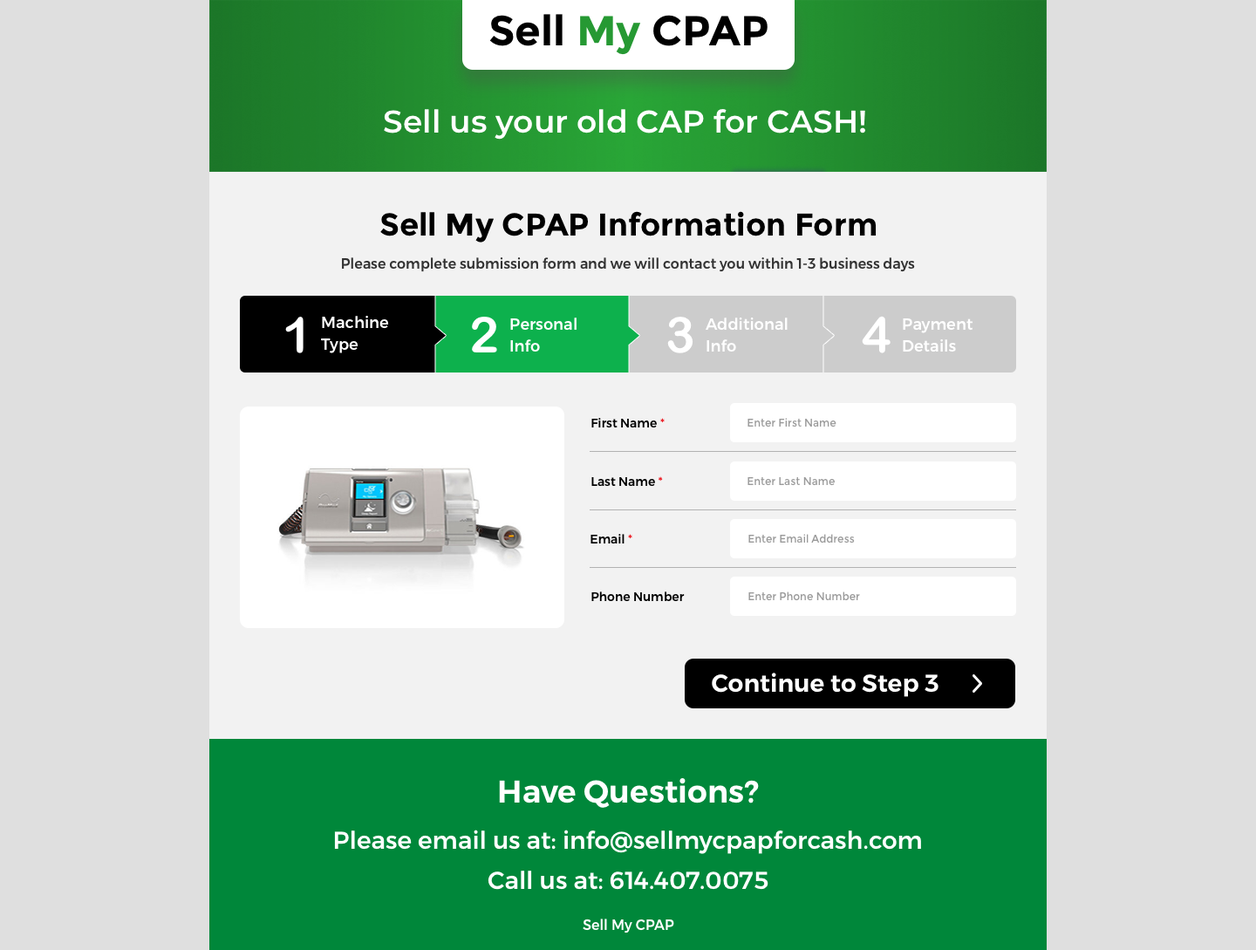
<style>
.page{position:relative;width:1256px;height:950px;background:#dfdfdf}
.page>*{position:absolute;margin:0}
.t1{font:41.9px "Montserrat-Bold";color:#000000}
.t2{font:41.9px "Montserrat-Bold";color:#269933}
.t3{font:31.4px "Montserrat-SemiBold";color:#ffffff}
.t4{font:31.4px "Montserrat-Bold";color:#000000}
.t5{font:14px "Montserrat-Medium";color:#323232}
.t6{font:49.6px "ArialW01-RoundedBold";color:#ffffff}
.t7{font:15.7px/21.8px "Montserrat-Medium";color:#ffffff}
.t8{font:12.2px "Montserrat-Medium";color:#000000}
.t9{font:12.2px "Montserrat-Medium";color:#ec1c24}
.t10{font:10.5px "Montserrat-Regular";color:#999999}
.t11{font:24.4px "Montserrat-SemiBold";color:#ffffff}
.t12{font:24.4px "Montserrat-Medium";color:#ffffff}
.t13{font:14px "Montserrat-Medium";color:#ffffff}
</style>
<div class="page">
<p class="t1" style="left:489px;top:14px;width:278px;height:41px">Sell <span class="t2">My </span>CPAP</p>
<p class="t3" style="left:384px;top:109px;width:481px;height:31px">Sell us your old CAP for CASH!</p>
<p class="t4" style="left:380px;top:211px;width:496px;height:31px">Sell My CPAP Information Form</p>
<p class="t5" style="left:342px;top:257px;width:573px;height:15px">Please complete submission form and we will contact you within 1-3 business days</p>
<p class="t6" style="left:285px;top:317px;width:18px;height:36px">1</p>
<p class="t7" style="left:321px;top:316px;width:68px;height:37px">Machine<br>Type</p>
<p class="t6" style="left:472px;top:317px;width:25px;height:35px">2</p>
<p class="t7" style="left:510px;top:317px;width:66px;height:34px">Personal<br>Info</p>
<p class="t6" style="left:667px;top:317px;width:26px;height:36px">3</p>
<p class="t7" style="left:705px;top:317px;width:82px;height:34px">Additional<br>Info</p>
<p class="t6" style="left:862px;top:316px;width:28px;height:37px">4</p>
<p class="t7" style="left:903px;top:318px;width:69px;height:34px">Payment<br>Details</p>
<p class="t8" style="left:591px;top:418px;width:73px;height:9px">First Name <span class="t9">*</span></p>
<p class="t10" style="left:747px;top:418px;width:89px;height:9px">Enter First Name</p>
<p class="t8" style="left:591px;top:476px;width:72px;height:10px">Last Name <span class="t9">*</span></p>
<p class="t10" style="left:747px;top:477px;width:88px;height:9px">Enter Last Name</p>
<p class="t8" style="left:590px;top:534px;width:42px;height:9px">Email <span class="t9">*</span></p>
<p class="t10" style="left:748px;top:534px;width:107px;height:9px">Enter Email Address</p>
<p class="t8" style="left:591px;top:591px;width:94px;height:10px">Phone Number</p>
<p class="t10" style="left:748px;top:591px;width:112px;height:10px">Enter Phone Number</p>
<p class="t11" style="left:712px;top:672px;width:226px;height:25px">Continue to Step 3</p>
<p class="t3" style="left:499px;top:778px;width:260px;height:29px">Have Questions?</p>
<p class="t12" style="left:334px;top:829px;width:587px;height:25px">Please email us at: info@sellmycpapforcash.com</p>
<p class="t12" style="left:487px;top:870px;width:281px;height:19px">Call us at: 614.407.0075</p>
<p class="t13" style="left:583px;top:918px;width:91px;height:15px">Sell My CPAP</p>
</div>
